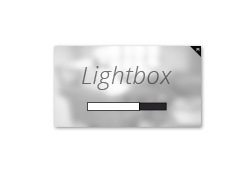
<style>
.page{position:relative;width:251px;height:181px;background:#ffffff}
.page>*{position:absolute;margin:0}
.t1{font:24px "OpenSansLight-Italic";letter-spacing:0.02em;color:#6f6d70}
</style>
<div class="page">
<p class="t1" style="left:82px;top:66px;width:90px;height:24px">Lightbox</p>
</div>
